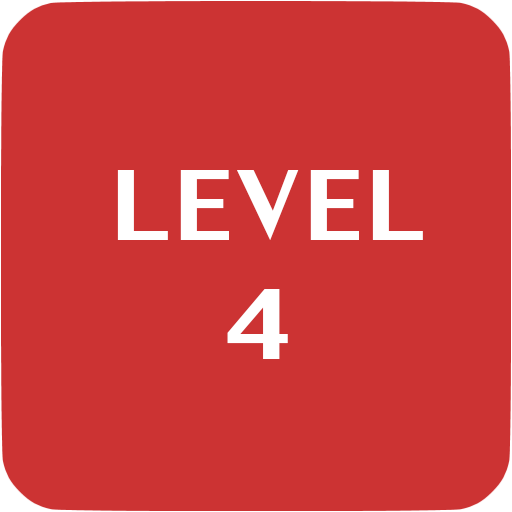
<style>
.page{position:relative;width:512px;height:512px;background:#cc3333}
.page>*{position:absolute;margin:0}
.t1{font:150px "LilyUPC";letter-spacing:0.05em;color:#ffffff}
</style>
<div class="page">
<p class="t1" style="left:117px;top:170px;width:306px;height:70px">LEVEL</p>
<p class="t1" style="left:227px;top:289px;width:61px;height:70px">4</p>
</div>
